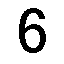
<style>
.page{position:relative;width:64px;height:64px;background:#ffffff}
.page>*{position:absolute;margin:0}
.t1{font:60px "MicrosoftSansSerif";color:#000000}
</style>
<div class="page">
<p class="t1" style="left:19px;top:8px;width:27px;height:45px">6</p>
</div>
